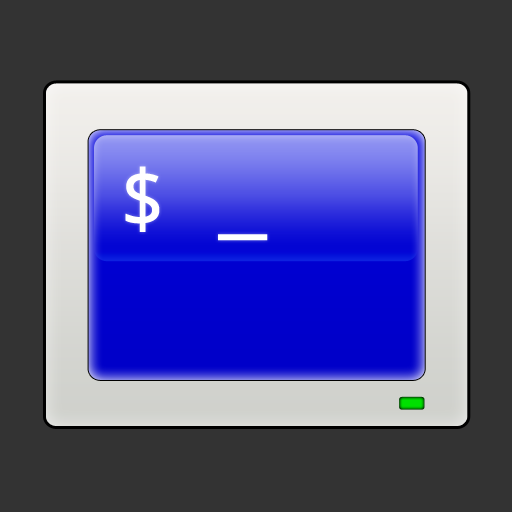
<style>
.page{position:relative;width:512px;height:512px;background:#333333}
.page>*{position:absolute;margin:0}
.t1{font:79.9px "DroidSansMono";color:#ffffff;font-weight:bold}
.t2{font:36.3px "Verdana-Bold";color:#ffffff}
</style>
<div class="page">
<p class="t1" style="left:125px;top:166px;width:143px;height:75px"><span class="t2"> </span>$ _</p>
</div>
